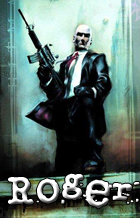
<style>
.page{position:relative;width:140px;height:218px}
.page>*{position:absolute;margin:0}
.t1{font:40.3px "junko-typewriter";font-weight:bold}
</style>
<div class="page">
<p class="t1" style="left:8px;top:173px;width:132px;height:36px">Roger</p>
</div>
